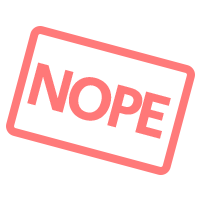
<style>
.page{position:relative;width:200px;height:200px;background:#ffffff}
.page>*{position:absolute;margin:0}
.t1{font:63.1px "SecularOne-Regular";letter-spacing:-0.08em;color:#ff7878}
</style>
<div class="page">
<p class="t1" style="left:27px;top:62px;width:144px;height:77px;rotate:15deg">NOPE</p>
</div>
